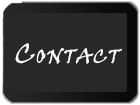
<style>
.page{position:relative;width:140px;height:105px;background:#282828}
.page>*{position:absolute;margin:0}
.t1{font:48px "VinerHandITC";letter-spacing:0.05em;color:#ffffff;font-variant:small-caps}
</style>
<div class="page">
<p class="t1" style="left:15px;top:43px;width:107px;height:21px">Contact</p>
</div>
